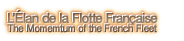
<style>
.page{position:relative;width:184px;height:41px;background:#ffffff}
.page>*{position:absolute;margin:0}
.t1{font:10px/12px "FutoGoB101Pr5-Bold";letter-spacing:-0.08em;color:#816b53;font-weight:bold}
.t2{font:13px/12px "FutoGoB101Pr5-Bold";letter-spacing:-0.08em;color:#816b53;font-weight:bold}
</style>
<div class="page">
<p class="t1" style="left:7px;top:10px;width:151px;height:23px"><span class="t2">L’Élan de la Flotte Française<br></span>The Momemtum of the French Fleet</p>
</div>
